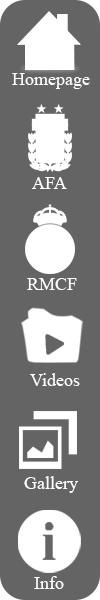
<style>
.page{position:relative;width:100px;height:600px;background:#646464}
.page>*{position:absolute;margin:0}
.t1{font:18px "TimesNewRomanPSMT";color:#ffffff}
</style>
<div class="page">
<p class="t1" style="left:12px;top:73px;width:78px;height:16px">Homepage</p>
<p class="t1" style="left:32px;top:177px;width:35px;height:12px">AFA</p>
<p class="t1" style="left:27px;top:278px;width:50px;height:12px">RMCF</p>
<p class="t1" style="left:30px;top:373px;width:50px;height:13px">Videos</p>
<p class="t1" style="left:24px;top:476px;width:55px;height:17px">Gallery</p>
<p class="t1" style="left:34px;top:576px;width:30px;height:13px">Info</p>
</div>
